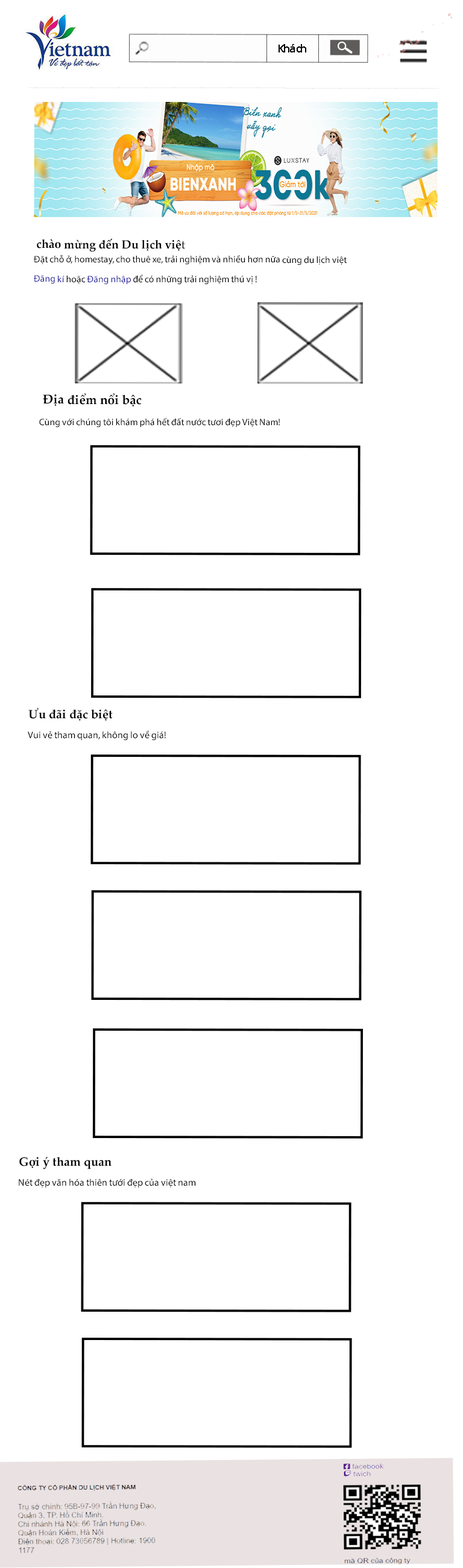
<style>
.page{position:relative;width:463px;height:1568px;background:#ffffff}
.page>*{position:absolute;margin:0}
.t1{font:10.7px "Tahoma";color:#000000}
.t2{font:11.7px "PalatinoLinotype-Bold";color:#000000}
.t3{font:11.7px "PalatinoLinotype-Roman";color:#000000}
.t4{font:9.4px "MyriadPro-Regular";color:#000000}
.t5{font:9.4px "MyriadPro-Regular";color:#23209b}
.t6{font:12.6px "PalatinoLinotype-Bold";color:#000000}
.t7{font:12.1px "PalatinoLinotype-Bold";color:#000000}
.t8{font:9.6px "MyriadPro-Regular";color:#000000}
</style>
<div class="page">
<p class="t1" style="left:279px;top:44px;width:27px;height:8px">Khách</p>
<p class="t2" style="left:37px;top:238px;width:148px;height:14px">chào mừng đến Du lịch việ<span class="t3">t</span></p>
<p class="t4" style="left:34px;top:255px;width:313px;height:10px">Đặt chỗ ở, homestay, cho thuê xe, trải nghiệm và nhiều hơn nữa cùng du lịch việt</p>
<p class="t4" style="left:34px;top:274px;width:223px;height:11px"><span class="t5">Đăng kí </span>hoặc <span class="t5">Đăng nhập </span>để có những trải nghiệm thú vị !</p>
<p class="t6" style="left:43px;top:393px;width:99px;height:13px">Địa điểm nổi bậc</p>
<p class="t4" style="left:39px;top:417px;width:241px;height:11px">Cùng với chúng tôi khám phá hết đất nước tươi đẹp Việt Nam!</p>
<p class="t7" style="left:28px;top:707px;width:85px;height:14px">Ưu đãi đặc biệt</p>
<p class="t8" style="left:28px;top:730px;width:138px;height:11px">Vui vẻ tham quan, không lo về giá!</p>
<p class="t7" style="left:19px;top:1157px;width:93px;height:12px">Gợi ý tham quan</p>
<p class="t8" style="left:19px;top:1178px;width:177px;height:10px">Nét đẹp văn hóa thiên tưới đẹp của việt nam</p>
</div>
